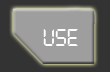
<style>
.page{position:relative;width:110px;height:72px;background:#9f9e9e}
.page>*{position:absolute;margin:0}
.t1{font:26px "DS-Digital";letter-spacing:-0.025em;color:#ffffff}
</style>
<div class="page">
<p class="t1" style="left:43px;top:29px;width:35px;height:17px">use</p>
</div>
